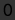
<style>
.page{position:relative;width:15px;height:20px;background:#333333}
.page>*{position:absolute;margin:0}
.t1{font:16px "CenturyGothic";color:#000000;font-weight:bold}
</style>
<div class="page">
<p class="t1" style="left:3px;top:3px;width:9px;height:13px">0</p>
</div>
